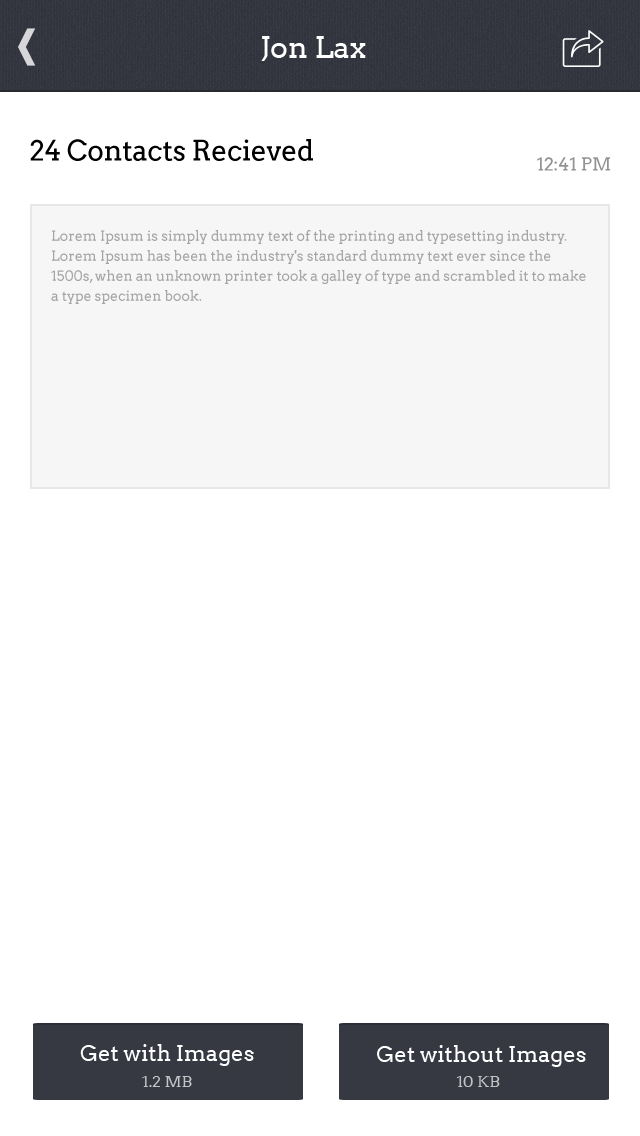
<style>
.page{position:relative;width:640px;height:1136px;background:#ffffff}
.page>*{position:absolute;margin:0}
.t1{font:30px "Arvo";color:#ffffff}
.t2{font:28px "Arvo";letter-spacing:-0.01em;color:#000000}
.t3{font:18px "Arvo";color:#929292}
.t4{font:14px/20px "Arvo";color:#a5a5a5}
.t5{font:22px "Arvo";color:#ffffff}
.t6{font:16px "Arvo";color:#c4c4c7}
</style>
<div class="page">
<p class="t1" style="left:261px;top:36px;width:105px;height:25px">Jon Lax</p>
<p class="t2" style="left:30px;top:139px;width:283px;height:22px">24 Contacts Recieved</p>
<p class="t3" style="left:537px;top:157px;width:73px;height:14px">12:41 PM</p>
<p class="t4" style="left:51px;top:230px;width:535px;height:74px">Lorem Ipsum is simply dummy text of the printing and typesetting industry. Lorem Ipsum has been the industry's standard dummy text ever since the 1500s, when an unknown printer took a galley of type and scrambled it to make a type specimen book.</p>
<p class="t5" style="left:80px;top:1044px;width:174px;height:22px">Get with Images</p>
<p class="t5" style="left:377px;top:1045px;width:209px;height:22px">Get without Images</p>
<p class="t6" style="left:142px;top:1076px;width:50px;height:11px">1.2 MB</p>
<p class="t6" style="left:456px;top:1076px;width:44px;height:11px">10 KB</p>
</div>
